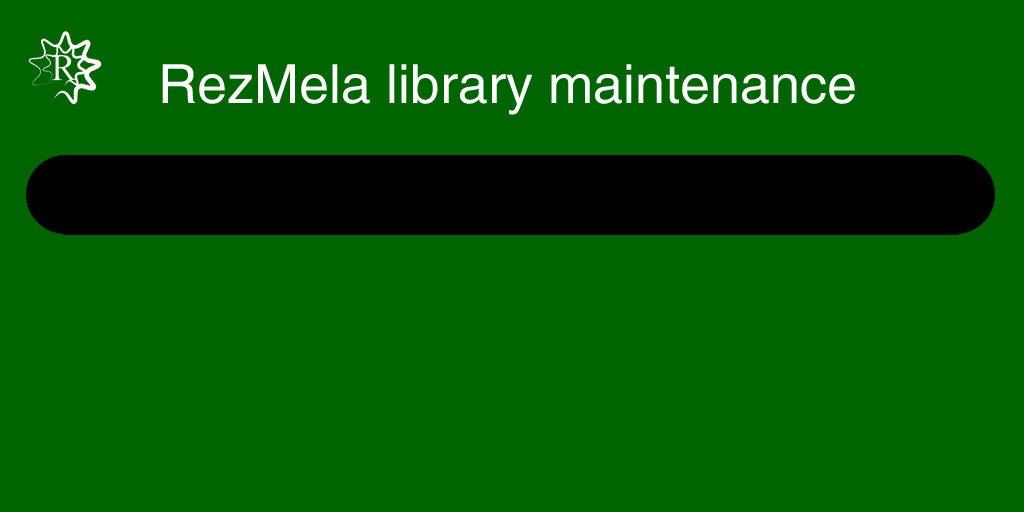
<style>
.page{position:relative;width:1024px;height:512px;background:#006400}
.page>*{position:absolute;margin:0}
.t1{font:54px "Helvetica";color:#ffffff}
</style>
<div class="page">
<p class="t1" style="left:162px;top:64px;width:693px;height:51px">RezMela library maintenance</p>
</div>
